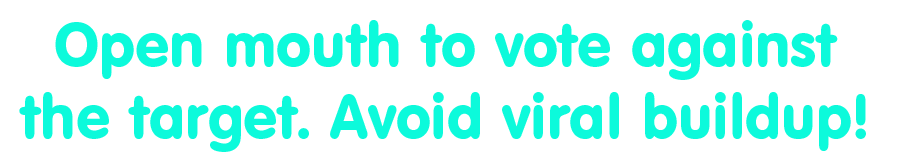
<style>
.page{position:relative;width:900px;height:162px;background:#ffffff}
.page>*{position:absolute;margin:0}
.t1{font:60px "VAGRoundedBT-Regular";color:#0cfadb}
</style>
<div class="page">
<p class="t1" style="left:19px;top:20px;width:847px;height:132px;text-align:center">Open mouth to vote against<br>the target. Avoid viral buildup!</p>
</div>
